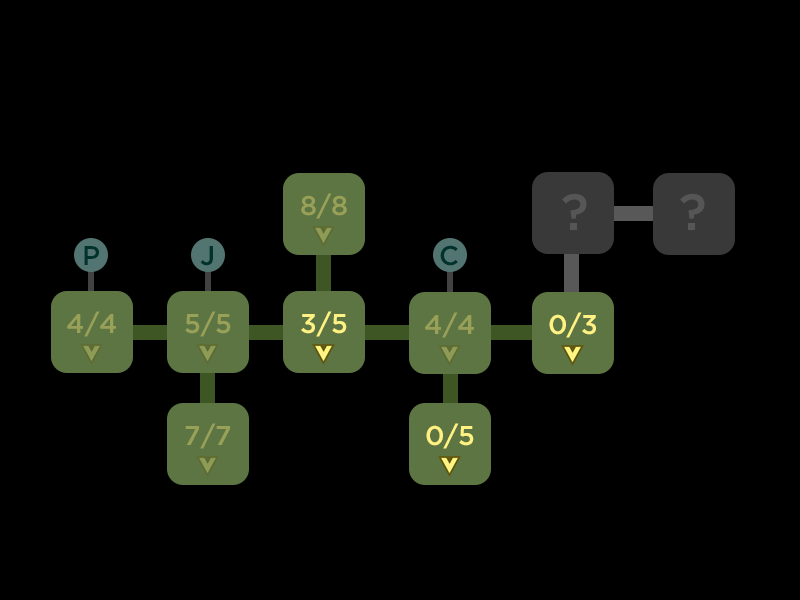
<style>
.page{position:relative;width:800px;height:600px;background:#000000}
.page>*{position:absolute;margin:0}
.t1{font:27px "Gotham-Medium";color:#99a159}
.t2{font:51px "Gotham-Medium";color:#565656}
.t3{font:27px "Gotham-Medium";color:#02322c}
.t4{font:27px "Gotham-Medium";color:#fff282}
</style>
<div class="page">
<p class="t1" style="left:301px;top:193px;width:46px;height:26px">8/8</p>
<p class="t2" style="left:562px;top:193px;width:25px;height:37px">?</p>
<p class="t2" style="left:680px;top:193px;width:25px;height:37px">?</p>
<p class="t3" style="left:84px;top:246px;width:15px;height:19px">P</p>
<p class="t3" style="left:200px;top:246px;width:13px;height:20px">J</p>
<p class="t3" style="left:440px;top:245px;width:18px;height:21px">C</p>
<p class="t1" style="left:67px;top:311px;width:49px;height:26px">4/4</p>
<p class="t1" style="left:185px;top:311px;width:46px;height:26px">5/5</p>
<p class="t4" style="left:301px;top:311px;width:46px;height:26px">3/5</p>
<p class="t1" style="left:425px;top:312px;width:49px;height:26px">4/4</p>
<p class="t4" style="left:549px;top:312px;width:47px;height:26px">0/3</p>
<p class="t1" style="left:185px;top:423px;width:45px;height:26px">7/7</p>
<p class="t4" style="left:426px;top:423px;width:48px;height:26px">0/5</p>
</div>
